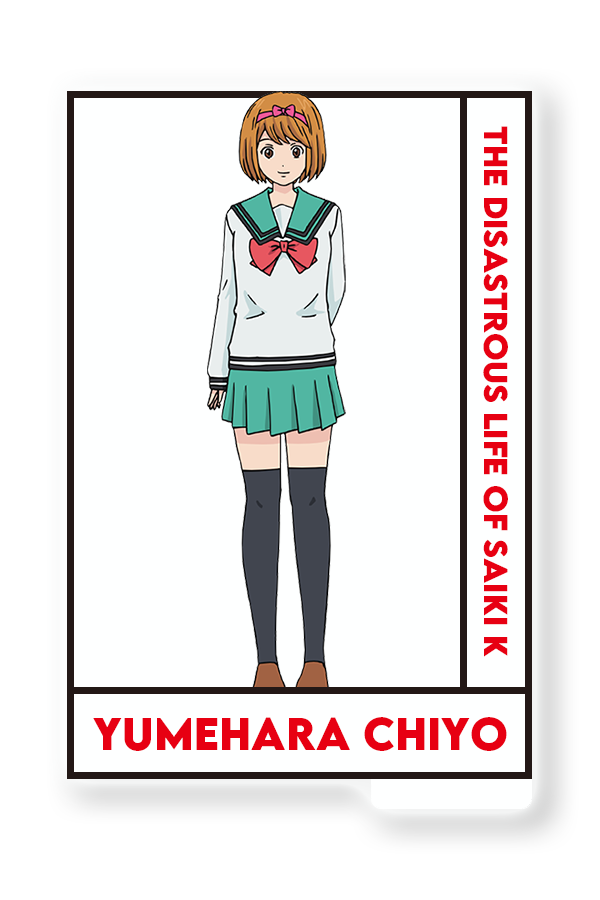
<style>
.page{position:relative;width:600px;height:900px;background:#feffff}
.page>*{position:absolute;margin:0}
.t1{font:29.6px "LEMONMILK-Bold";color:#e70012}
.t2{font:40.6px "LEMONMILK-Bold";color:#e70012}
</style>
<div class="page">
<p class="t1" style="left:483px;top:126px;width:25px;height:531px;rotate:90deg">THE disastrous Life of saiki K</p>
<p class="t2" style="left:93px;top:717px;width:414px;height:34px">Yumehara Chiyo</p>
</div>
